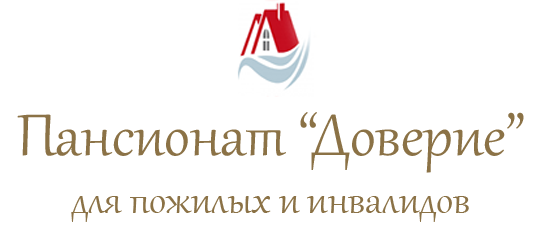
<style>
.page{position:relative;width:541px;height:240px;background:#ffffff}
.page>*{position:absolute;margin:0}
.t1{font:48px "Gabriola";color:#8b7246}
.t2{font:72px "Gabriola";color:#8b7246}
</style>
<div class="page">
<p class="t1" style="left:17px;top:112px;width:507px;height:110px;text-align:center"><span class="t2">Пансионат “Доверие”<br></span>для пожилых и инвалидов</p>
</div>
